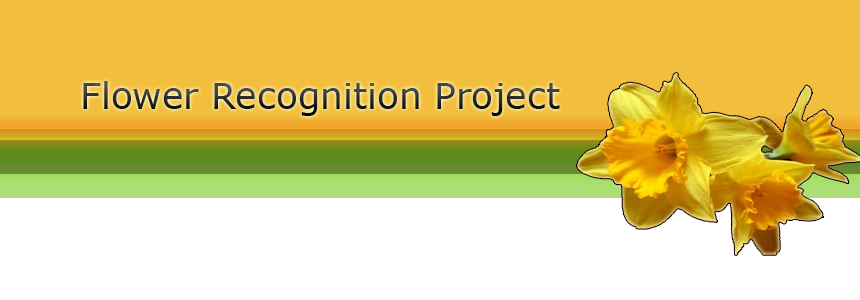
<style>
.page{position:relative;width:860px;height:300px;background:#ffffff}
.page>*{position:absolute;margin:0}
.t1{font:36px "Verdana"}
</style>
<div class="page">
<p class="t1" style="left:83px;top:81px;width:477px;height:35px">Flower Recognition Project</p>
</div>
